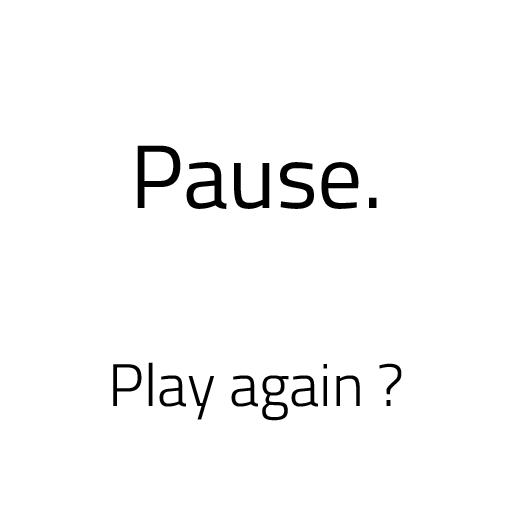
<style>
.page{position:relative;width:512px;height:512px;background:#ffffff}
.page>*{position:absolute;margin:0}
.t1{font:90px "TitilliumWeb-Regular";color:#000000}
.t2{font:60px "TitilliumWeb-Light";color:#000000}
</style>
<div class="page">
<p class="t1" style="left:137px;top:145px;width:240px;height:64px">Pause.</p>
<p class="t2" style="left:113px;top:362px;width:289px;height:59px">Play again ?</p>
</div>
